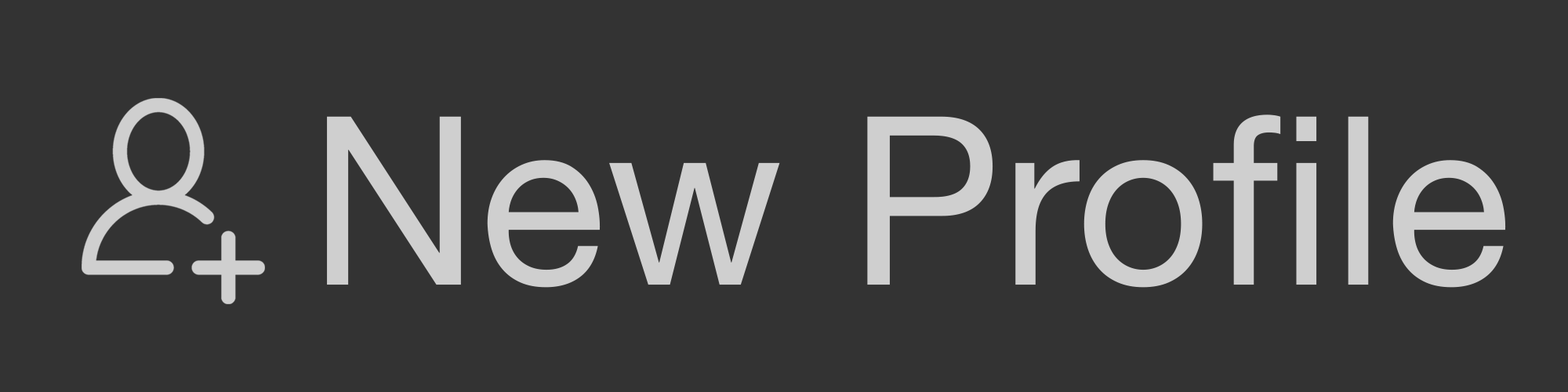
<style>
.page{position:relative;width:1568px;height:392px;background:#333333}
.page>*{position:absolute;margin:0}
.t1{font:235.2px "HelveticaNeue";color:#cfcfcf}
</style>
<div class="page">
<p class="t1" style="left:327px;top:114px;width:1179px;height:174px">New Profile</p>
</div>
